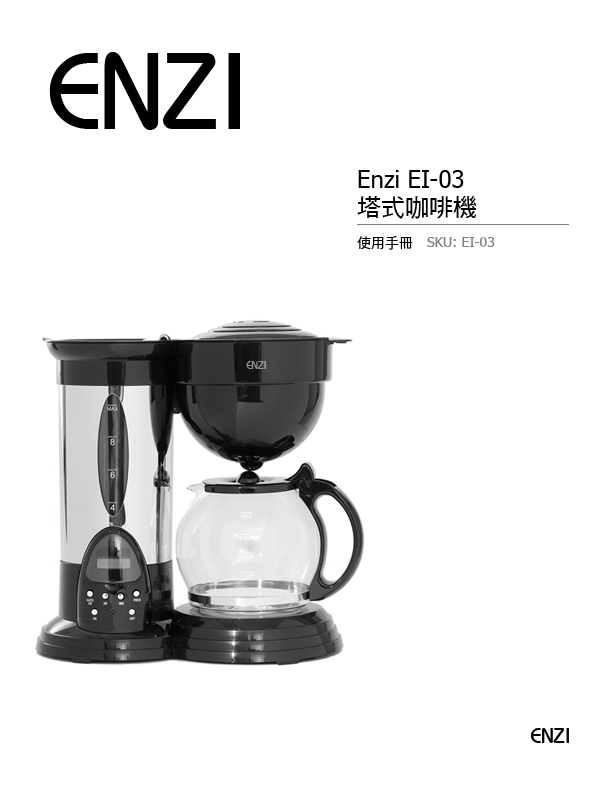
<style>
.page{position:relative;width:612px;height:792px;background:#ffffff}
.page>*{position:absolute;margin:0}
.t1{font:24px/26px "Tahoma";color:#010101}
.t2{font:24px/26px "DFHei-Md-HKP-BF";color:#010101}
.t3{font:14px "DFHei-Md-HKP-BF";color:#010101;text-transform:uppercase}
.t4{font:14px "Tahoma";color:#808080;text-transform:uppercase}
</style>
<div class="page">
<p class="t1" style="left:357px;top:170px;width:119px;height:49px">Enzi EI-03 <br><span class="t2">塔式咖啡機</span></p>
<p class="t3" style="left:357px;top:236px;width:56px;height:14px">使用手冊</p>
<p class="t4" style="left:427px;top:237px;width:68px;height:10px">SKU: EI-03</p>
</div>
